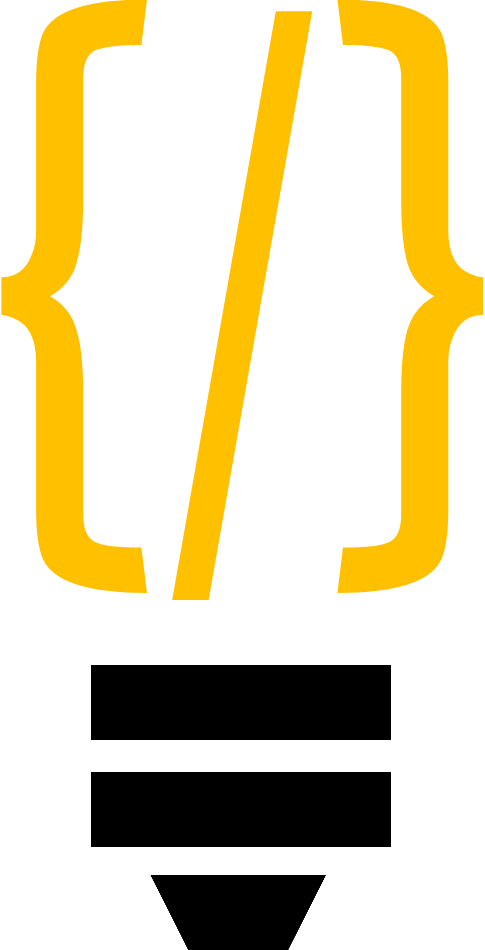
<style>
.page{position:relative;width:485px;height:950px;background:#ffffff}
.page>*{position:absolute;margin:0}
.t1{font:700px "AverageSans-Regular";color:#ffc000;scale:0.8 1}
</style>
<div class="page">
<p class="t1" style="left:1px;top:0px;width:483px;height:600px">{/}</p>
</div>
